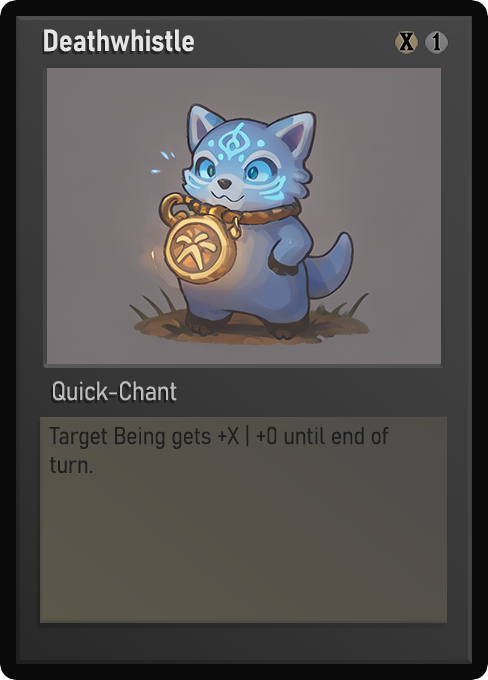
<style>
.page{position:relative;width:488px;height:680px}
.page>*{position:absolute;margin:0}
.t1{font:30px "Bahnschrift-SemiBoldSemiCondensed";color:#f2f2f2;font-weight:bold}
.t2{font:25px "WTRRoycroft";color:#000000;font-weight:bold;scale:1.09 1}
.t3{font:26px "Bahnschrift-LightSemiCondensed";color:#c8c8c8;font-weight:bold}
.t4{font:24px "Bahnschrift-LightSemiCondensed";color:#1e1e1e;font-weight:bold}
</style>
<div class="page">
<p class="t1" style="left:44px;top:29px;width:150px;height:23px;opacity:0.9">Deathwhistle</p>
<p class="t2" style="left:399px;top:32px;width:15px;height:19px">X</p>
<p class="t2" style="left:432px;top:32px;width:9px;height:19px">1</p>
<p class="t3" style="left:53px;top:381px;width:124px;height:20px;opacity:0.9">Quick-Chant</p>
<p class="t4" style="left:49px;top:424px;width:340px;height:50px">Target Being gets +X | +0 until end of turn.</p>
</div>
